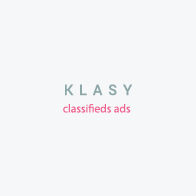
<style>
.page{position:relative;width:196px;height:196px;background:#f5f7f8}
.page>*{position:absolute;margin:0}
.t1{font:11.6px "MyriadPro-Regular";color:#f06292}
.t2{font:14.5px "Roboto-Medium";letter-spacing:0.4em;color:#8da7a9;text-transform:uppercase}
</style>
<div class="page">
<p class="t1" style="left:63px;top:84px;width:69px;height:29px;text-align:center"><span class="t2">KLASY<br> <br></span>classifieds ads</p>
</div>
